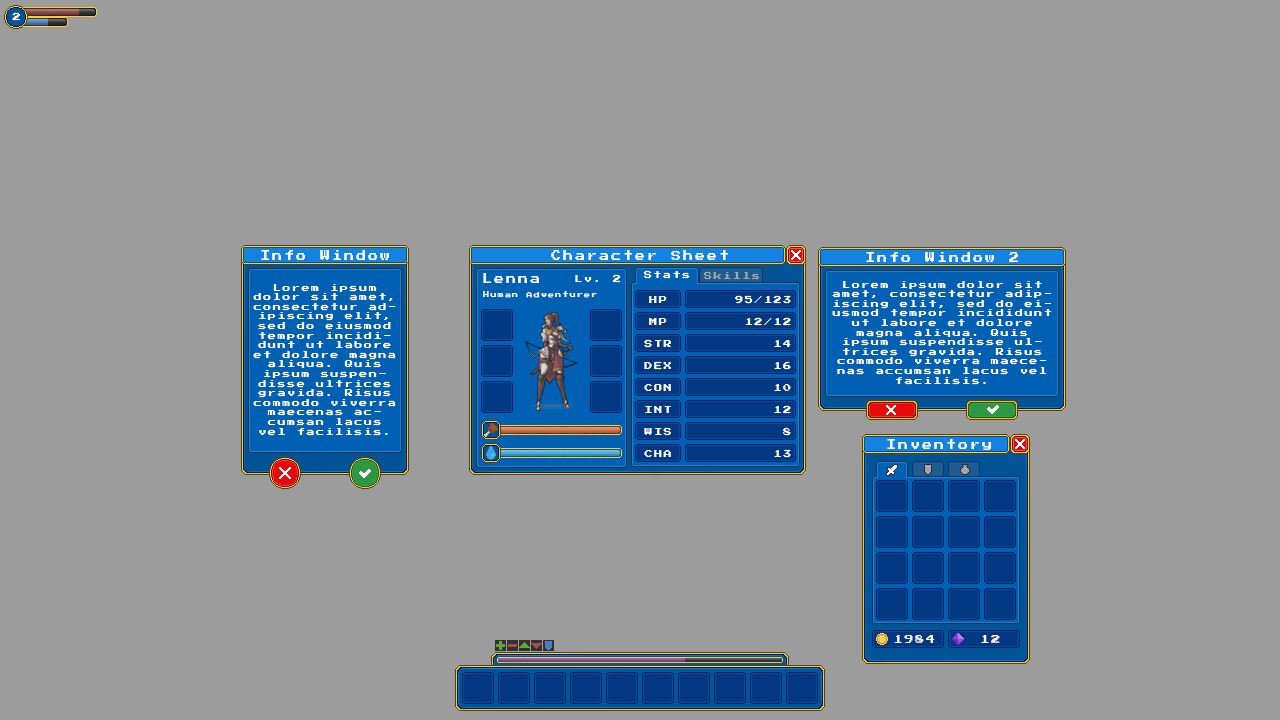
<style>
.page{position:relative;width:1280px;height:720px;background:#9c9c9c}
.page>*{position:absolute;margin:0}
.t1{font:8px "PressStart2P-Regular";letter-spacing:0.2em;color:#ffffff}
.t2{font:10px "PressStart2P-Regular";letter-spacing:0.2em;color:#ffffff}
.t3{font:8px "PressStart2P-Regular";letter-spacing:0.2em;color:#a7a7a7}
.t4{font:6px "PressStart2P-Regular";letter-spacing:0.2em;color:#ffffff}
.t5{font:9px "PressStart2P-Regular";letter-spacing:0.2em;color:#ffffff}
</style>
<div class="page">
<p class="t1" style="left:12px;top:12px;width:8px;height:9px">2</p>
<p class="t2" style="left:261px;top:250px;width:128px;height:10px">Info Window</p>
<p class="t2" style="left:551px;top:250px;width:177px;height:10px">Character Sheet</p>
<p class="t2" style="left:866px;top:252px;width:152px;height:10px">Info Window 2</p>
<p class="t1" style="left:643px;top:270px;width:47px;height:9px">Stats</p>
<p class="t2" style="left:483px;top:273px;width:56px;height:10px">Lenna</p>
<p class="t1" style="left:575px;top:274px;width:46px;height:9px">Lv. 2</p>
<p class="t3" style="left:703px;top:271px;width:57px;height:9px">Skills</p>
<p class="t1" style="left:832px;top:281px;width:220px;height:104px;text-align:center">Lorem ipsum dolor sit amet, consectetur adipiscing elit, sed do eiusmod tempor incididunt ut labore et dolore magna aliqua. Quis ipsum suspendisse ultrices gravida. Risus commodo viverra maecenas accumsan lacus vel facilisis.</p>
<p class="t1" style="left:253px;top:284px;width:143px;height:152px;text-align:center">Lorem ipsum dolor sit amet, consectetur adipiscing elit, sed do eiusmod tempor incididunt ut labore et dolore magna aliqua. Quis ipsum suspendisse ultrices gravida. Risus commodo viverra maecenas accumsan lacus vel facilisis.</p>
<p class="t4" style="left:483px;top:291px;width:114px;height:7px">Human Adventurer</p>
<p class="t1" style="left:649px;top:296px;width:18px;height:7px">HP</p>
<p class="t1" style="left:735px;top:295px;width:56px;height:9px">95/123</p>
<p class="t1" style="left:649px;top:318px;width:18px;height:7px">MP</p>
<p class="t1" style="left:745px;top:317px;width:46px;height:9px">12/12</p>
<p class="t1" style="left:644px;top:339px;width:27px;height:9px">STR</p>
<p class="t1" style="left:774px;top:340px;width:17px;height:7px">14</p>
<p class="t1" style="left:644px;top:361px;width:27px;height:9px">DEX</p>
<p class="t1" style="left:774px;top:361px;width:17px;height:9px">16</p>
<p class="t1" style="left:644px;top:384px;width:27px;height:7px">CON</p>
<p class="t1" style="left:774px;top:384px;width:17px;height:7px">10</p>
<p class="t1" style="left:645px;top:406px;width:26px;height:7px">INT</p>
<p class="t1" style="left:774px;top:405px;width:17px;height:9px">12</p>
<p class="t1" style="left:644px;top:427px;width:27px;height:9px">WIS</p>
<p class="t1" style="left:783px;top:427px;width:8px;height:9px">8</p>
<p class="t1" style="left:774px;top:449px;width:17px;height:9px">13</p>
<p class="t2" style="left:887px;top:439px;width:104px;height:11px">Inventory</p>
<p class="t1" style="left:644px;top:450px;width:27px;height:7px">CHA</p>
<p class="t5" style="left:894px;top:635px;width:41px;height:8px">1984</p>
<p class="t5" style="left:981px;top:635px;width:19px;height:8px">12</p>
</div>
